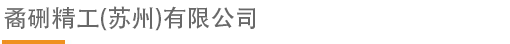
<style>
.page{position:relative;width:510px;height:44px;background:#ffffff}
.page>*{position:absolute;margin:0}
.t1{font:24px "AdobeHeitiStd-Regular";color:#686868}
</style>
<div class="page">
<p class="t1" style="left:4px;top:6px;width:251px;height:25px">矞硎精工(苏州)有限公司</p>
</div>
